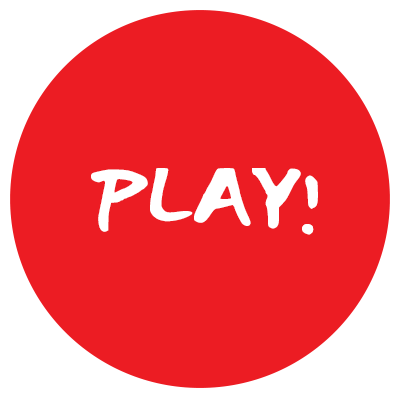
<style>
.page{position:relative;width:400px;height:400px;background:#ec1c23}
.page>*{position:absolute;margin:0}
.t1{font:88.8px "emilyyyyyy";color:#ffffff}
</style>
<div class="page">
<p class="t1" style="left:91px;top:168px;width:227px;height:67px">PLAY!</p>
</div>
